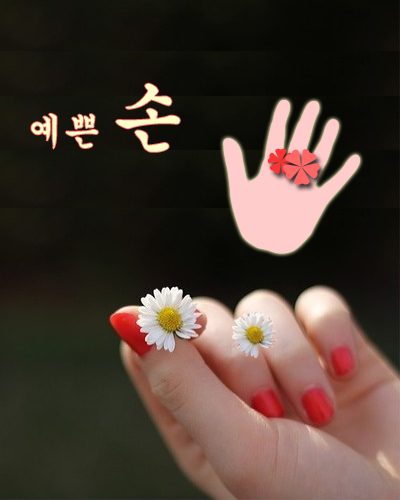
<style>
.page{position:relative;width:400px;height:500px}
.page>*{position:absolute;margin:0}
.t1{font:36px "Gungsuh";color:#ffffcc}
.t2{font:72px "Gungsuh";color:#ffffcc}
</style>
<div class="page">
<p class="t1" style="left:31px;top:83px;width:149px;height:69px">예쁜 <span class="t2">손</span></p>
</div>
